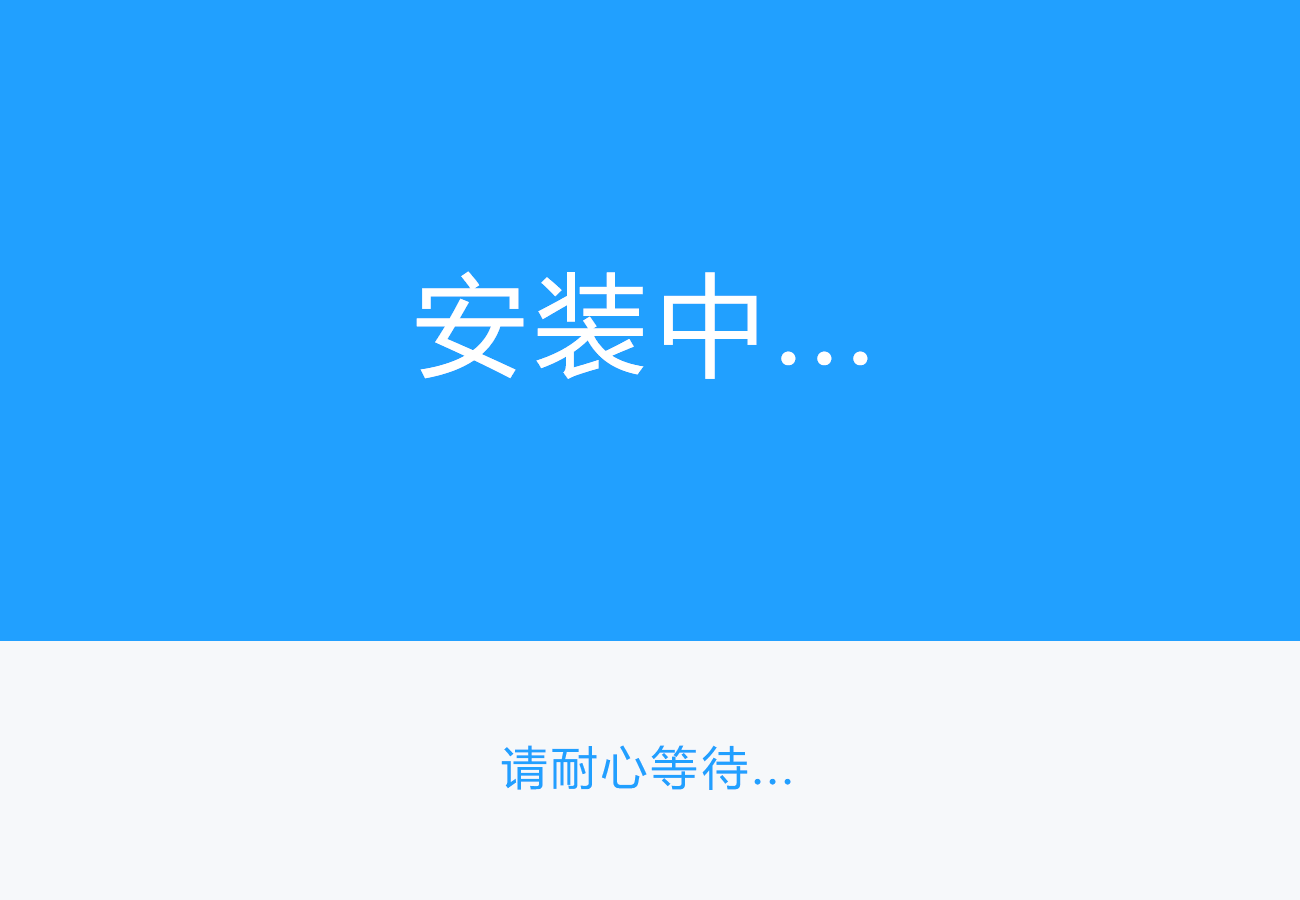
<style>
.page{position:relative;width:1300px;height:900px;background:#21a0ff}
.page>*{position:absolute;margin:0}
.t1{font:110px "MicrosoftYaHei";letter-spacing:0.09em;color:#ffffff}
.t2{font:46px "MicrosoftYaHei";letter-spacing:0.09em;color:#21a0ff}
</style>
<div class="page">
<p class="t1" style="left:416px;top:271px;width:452px;height:108px">安装中...</p>
<p class="t2" style="left:501px;top:745px;width:290px;height:45px">请耐心等待...</p>
</div>
